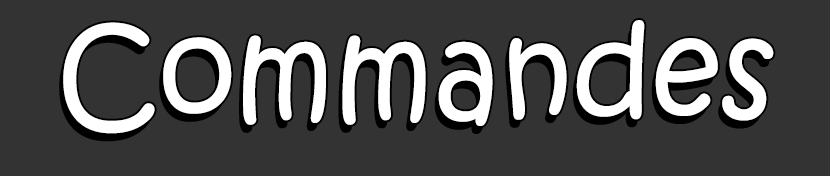
<style>
.page{position:relative;width:830px;height:176px;background:#333333}
.page>*{position:absolute;margin:0}
.t1{font:124.4px "KristenITC-Regular";color:#ffffff}
</style>
<div class="page">
<p class="t1" style="left:63px;top:20px;width:711px;height:114px">Commandes</p>
</div>
